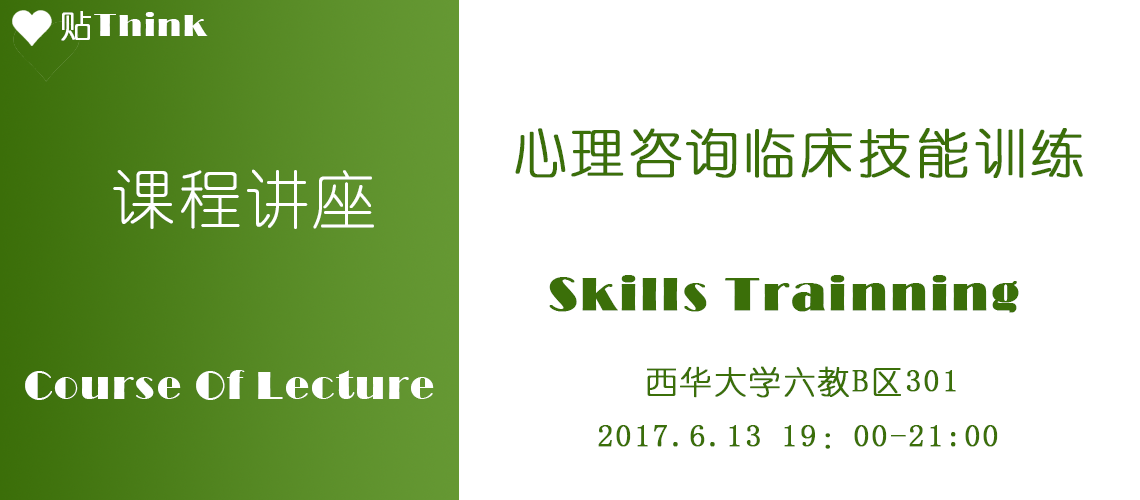
<style>
.page{position:relative;width:1140px;height:500px;background:#ffffff}
.page>*{position:absolute;margin:0}
.t1{font:32px "Broadway";letter-spacing:0.05em;color:#ffffff}
.t2{font:32px "YouYuan";letter-spacing:0.05em;color:#ffffff;font-weight:bold}
.t3{font:53.3px "YouYuan";letter-spacing:0.05em;color:#3b6f09;font-weight:bold}
.t4{font:64px "YouYuan";letter-spacing:0.05em;color:#ffffff}
.t5{font:48px "Broadway";letter-spacing:0.05em;color:#3b6f09;font-weight:bold}
.t6{font:32px "YouYuan";letter-spacing:0.05em;color:#3b6f09;font-weight:bold}
.t7{font:40px "Broadway";letter-spacing:0.05em;color:#ffffff}
</style>
<div class="page">
<p class="t1" style="left:61px;top:11px;width:147px;height:30px"><span class="t2"> 贴</span>Think</p>
<p class="t3" style="left:515px;top:128px;width:568px;height:51px">心理咨询临床技能训练</p>
<p class="t4" style="left:113px;top:169px;width:261px;height:60px">课程讲座</p>
<p class="t5" style="left:549px;top:275px;width:470px;height:38px">Skills Trainning</p>
<p class="t6" style="left:647px;top:366px;width:309px;height:32px">西华大学六教B区301</p>
<p class="t7" style="left:25px;top:370px;width:409px;height:30px">Course Of Lecture</p>
<p class="t6" style="left:598px;top:425px;width:400px;height:24px">2017.6.13 19：00-21:00</p>
</div>
